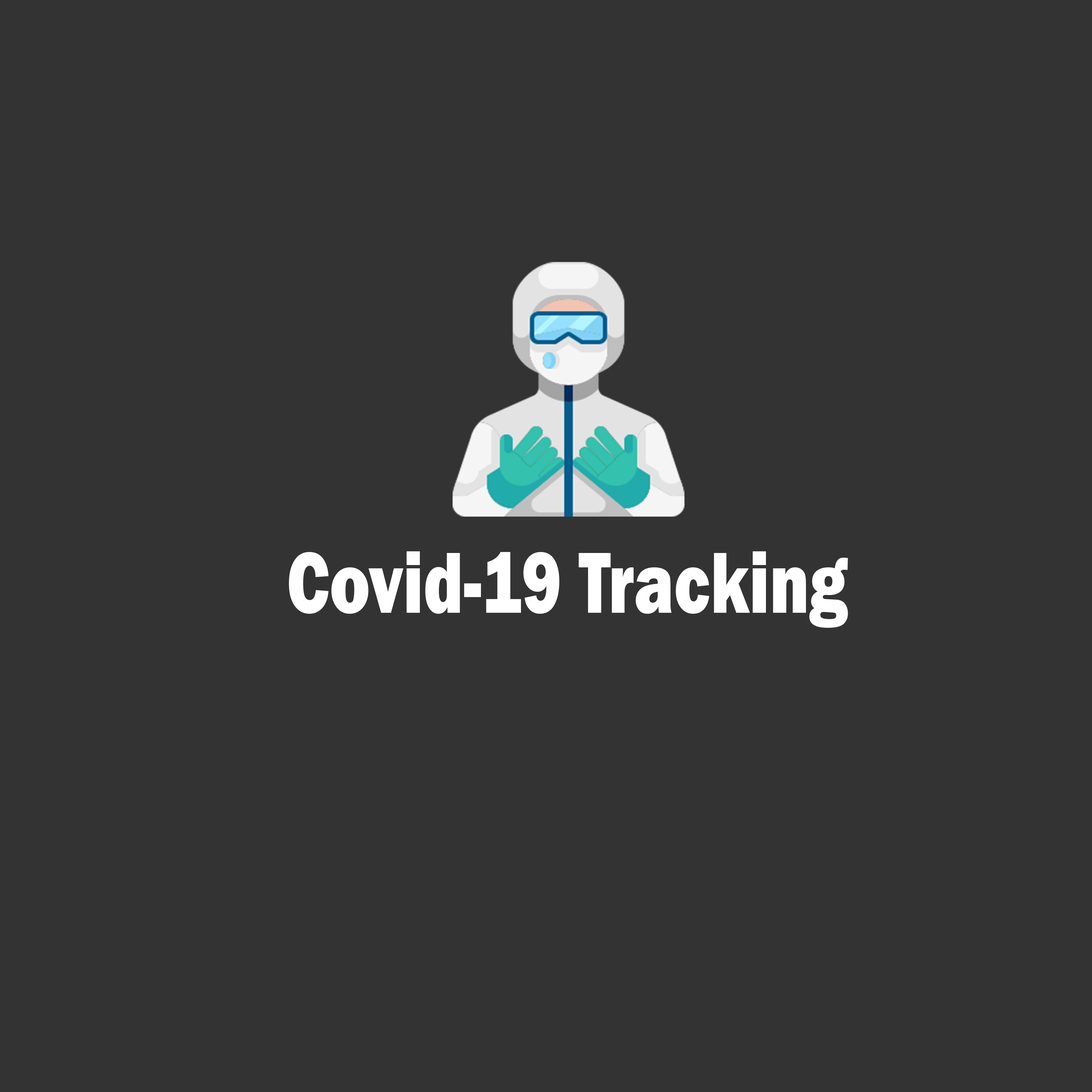
<style>
.page{position:relative;width:1092px;height:1092px;background:#333333}
.page>*{position:absolute;margin:0}
.t1{font:89.3px "FranklinGothic-Heavy";color:#ffffff;scale:0.76 1}
</style>
<div class="page">
<p class="t1" style="left:289px;top:551px;width:559px;height:77px">Covid-19 Tracking</p>
</div>
